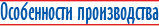
<style>
.page{position:relative;width:159px;height:26px;background:#ffffff}
.page>*{position:absolute;margin:0}
.t1{font:23px "OzHandicraftCyrillicBT-Roman";color:#0056a8}
</style>
<div class="page">
<p class="t1" style="left:0px;top:2px;width:159px;height:22px">Особенности производства</p>
</div>
